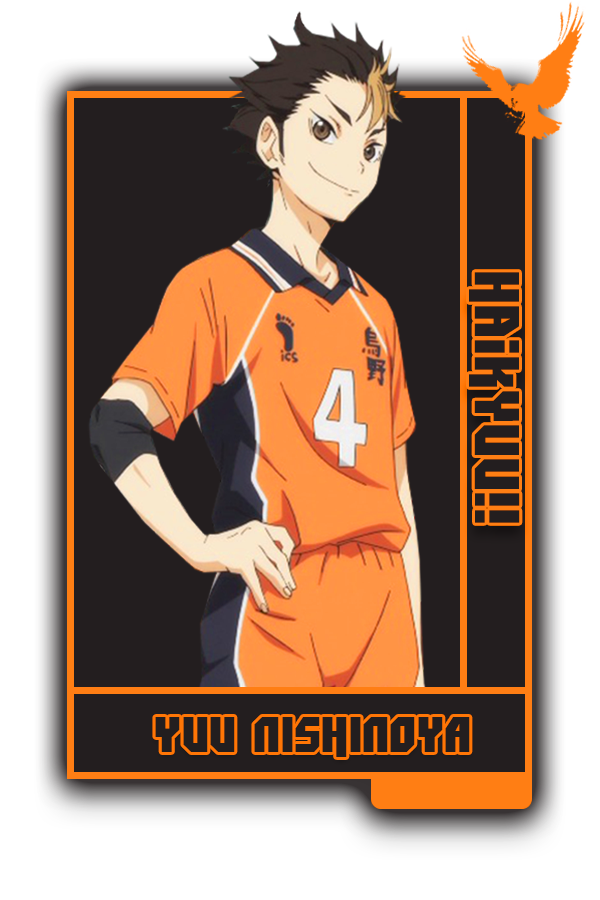
<style>
.page{position:relative;width:600px;height:900px;background:#231e1f}
.page>*{position:absolute;margin:0}
.t1{font:62.9px "Dimitri";color:#231f20}
.t2{font:50.5px "Dimitri";color:#231f20}
</style>
<div class="page">
<p class="t1" style="left:469px;top:272px;width:51px;height:251px;rotate:90deg">Haikyuu!!</p>
<p class="t2" style="left:155px;top:717px;width:315px;height:40px">YUU NISHINOYA</p>
</div>
